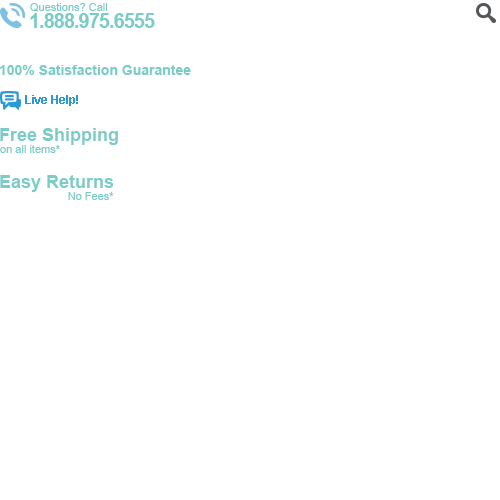
<style>
.page{position:relative;width:500px;height:500px;background:#ffffff}
.page>*{position:absolute;margin:0}
.t1{font:11px "ArialMT";color:#7bcbc7}
.t2{font:20px "Arial-BoldMT";letter-spacing:-0.05em;color:#7bcbc7}
.t3{font:14px "Arial-BoldMT";color:#7bcbc7}
.t4{font:12px "Arial-BoldMT";color:#2c99d4}
.t5{font:18px "Arial-BoldMT";color:#7bcbc7}
</style>
<div class="page">
<p class="t1" style="left:30px;top:3px;width:77px;height:9px">Questions? Call</p>
<p class="t2" style="left:30px;top:13px;width:125px;height:15px">1.888.975.6555</p>
<p class="t3" style="left:0px;top:65px;width:191px;height:10px">100% Satisfaction Guarantee</p>
<p class="t4" style="left:25px;top:95px;width:53px;height:11px">Live Help!</p>
<p class="t5" style="left:0px;top:128px;width:118px;height:17px">Free Shipping</p>
<p class="t1" style="left:0px;top:145px;width:60px;height:8px">on all items*</p>
<p class="t5" style="left:0px;top:175px;width:114px;height:17px">Easy Returns</p>
<p class="t1" style="left:68px;top:192px;width:46px;height:8px">No Fees*</p>
</div>
